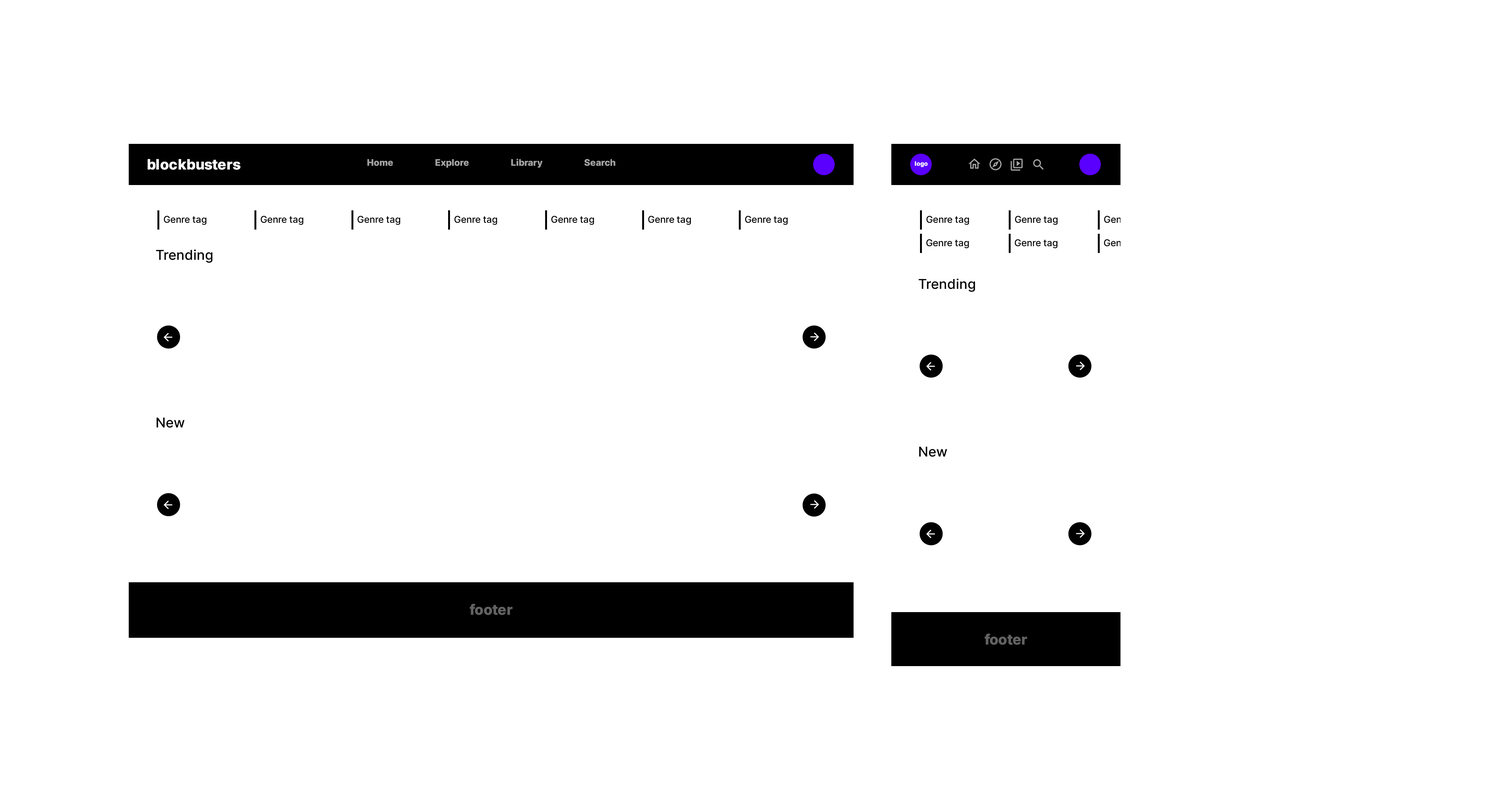
<style>
.page{position:relative;width:1498px;height:796px;background:#ffffff}
.page>*{position:absolute;margin:0}
.t1{font:14.2px "Inter-ExtraBold";color:#ffffff}
.t2{font:9.1px "Inter-ExtraBold";color:#a2a2a2}
.t3{font:6px "Inter-ExtraBold";color:#ffffff}
.t4{font:9.3px "Inter-Medium";color:#000000}
.t5{font:9.3px "Inter-Medium"}
.t6{font:13.6px "Inter-Medium";color:#000000}
.t7{font:14.2px "Inter-ExtraBold";color:#626262}
</style>
<div class="page">
<p class="t1" style="left:148px;top:159px;width:93px;height:11px">blockbusters</p>
<p class="t2" style="left:367px;top:159px;width:248px;height:9px">Home Explore Library Search</p>
<p class="t3" style="left:915px;top:161px;width:13px;height:6px">logo</p>
<p class="t4" style="left:164px;top:216px;width:43px;height:9px">Genre tag</p>
<p class="t4" style="left:261px;top:216px;width:43px;height:9px">Genre tag</p>
<p class="t4" style="left:358px;top:216px;width:42px;height:9px">Genre tag</p>
<p class="t4" style="left:454px;top:216px;width:43px;height:9px">Genre tag</p>
<p class="t4" style="left:551px;top:216px;width:43px;height:9px">Genre tag</p>
<p class="t4" style="left:648px;top:216px;width:43px;height:9px">Genre tag</p>
<p class="t4" style="left:745px;top:216px;width:43px;height:9px">Genre tag</p>
<p class="t4" style="left:927px;top:216px;width:42px;height:9px">Genre tag</p>
<p class="t4" style="left:1015px;top:216px;width:43px;height:9px">Genre tag</p>
<p class="t5" style="left:1104px;top:216px;width:43px;height:9px">Genre tag</p>
<p class="t4" style="left:926px;top:239px;width:43px;height:9px">Genre tag</p>
<p class="t4" style="left:1015px;top:239px;width:43px;height:9px">Genre tag</p>
<p class="t5" style="left:1104px;top:239px;width:43px;height:9px">Genre tag</p>
<p class="t6" style="left:156px;top:249px;width:57px;height:14px">Trending</p>
<p class="t6" style="left:919px;top:278px;width:56px;height:14px">Trending</p>
<p class="t6" style="left:156px;top:417px;width:29px;height:11px">New</p>
<p class="t6" style="left:919px;top:446px;width:28px;height:11px">New</p>
<p class="t7" style="left:470px;top:604px;width:43px;height:11px">footer</p>
<p class="t7" style="left:985px;top:634px;width:42px;height:11px">footer</p>
</div>
